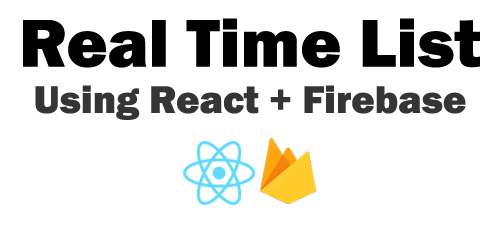
<style>
.page{position:relative;width:500px;height:250px;background:#ffffff}
.page>*{position:absolute;margin:0}
.t1{font:70px "FranklinGothic-Heavy";color:#000000}
.t2{font:40px "FranklinGothic-Heavy";color:#353535}
</style>
<div class="page">
<p class="t1" style="left:23px;top:18px;width:457px;height:50px">Real Time List</p>
<p class="t2" style="left:35px;top:85px;width:431px;height:35px">Using React + Firebase</p>
</div>
